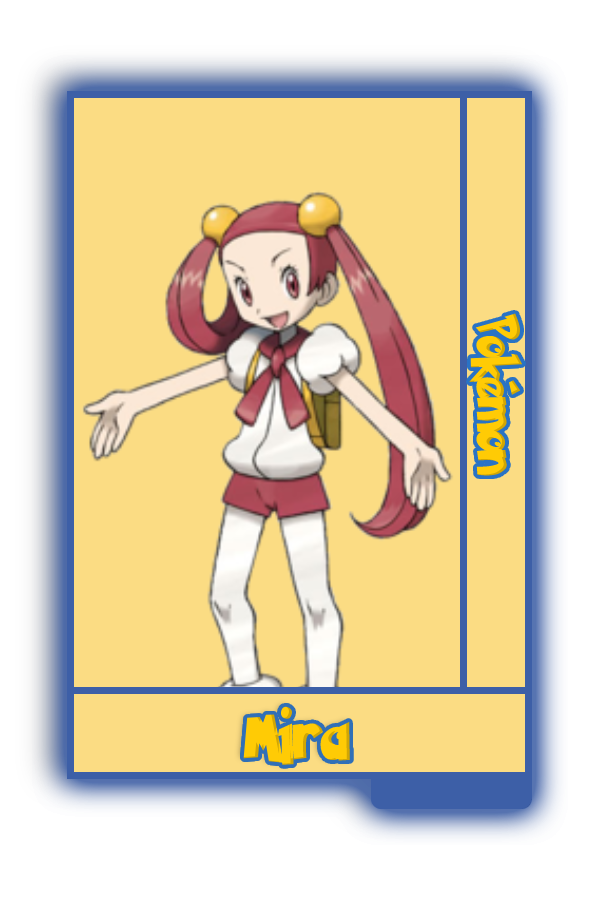
<style>
.page{position:relative;width:600px;height:900px;background:#fbdc83}
.page>*{position:absolute;margin:0}
.t1{font:48.8px "PokemonSolidNormal";color:#ffcb05;scale:0.8 1}
.t2{font:56.6px "PokemonSolidNormal";color:#ffcb05;scale:0.92 1}
</style>
<div class="page">
<p class="t1" style="left:469px;top:313px;width:54px;height:163px;rotate:90deg">Pokémon</p>
<p class="t2" style="left:243px;top:706px;width:107px;height:59px">Mira</p>
</div>
